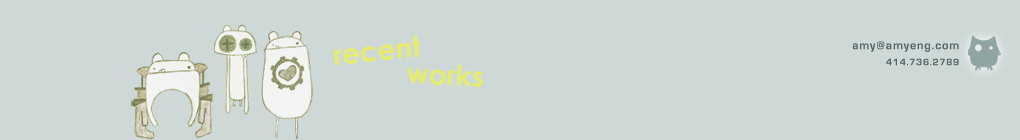
<style>
.page{position:relative;width:1020px;height:140px;background:#ced9d7}
.page>*{position:absolute;margin:0}
.t1{font:12.2px/8.5px "EurostileBold";letter-spacing:0.075em;color:#526364}
.t2{font:9.7px/8.5px "EurostileBold";letter-spacing:0.075em;color:#526364}
</style>
<div class="page">
<p class="t1" style="left:852px;top:41px;width:107px;height:25px;text-align:right">amy@amyeng.com<br><span class="t2">414.736.2789</span></p>
</div>
